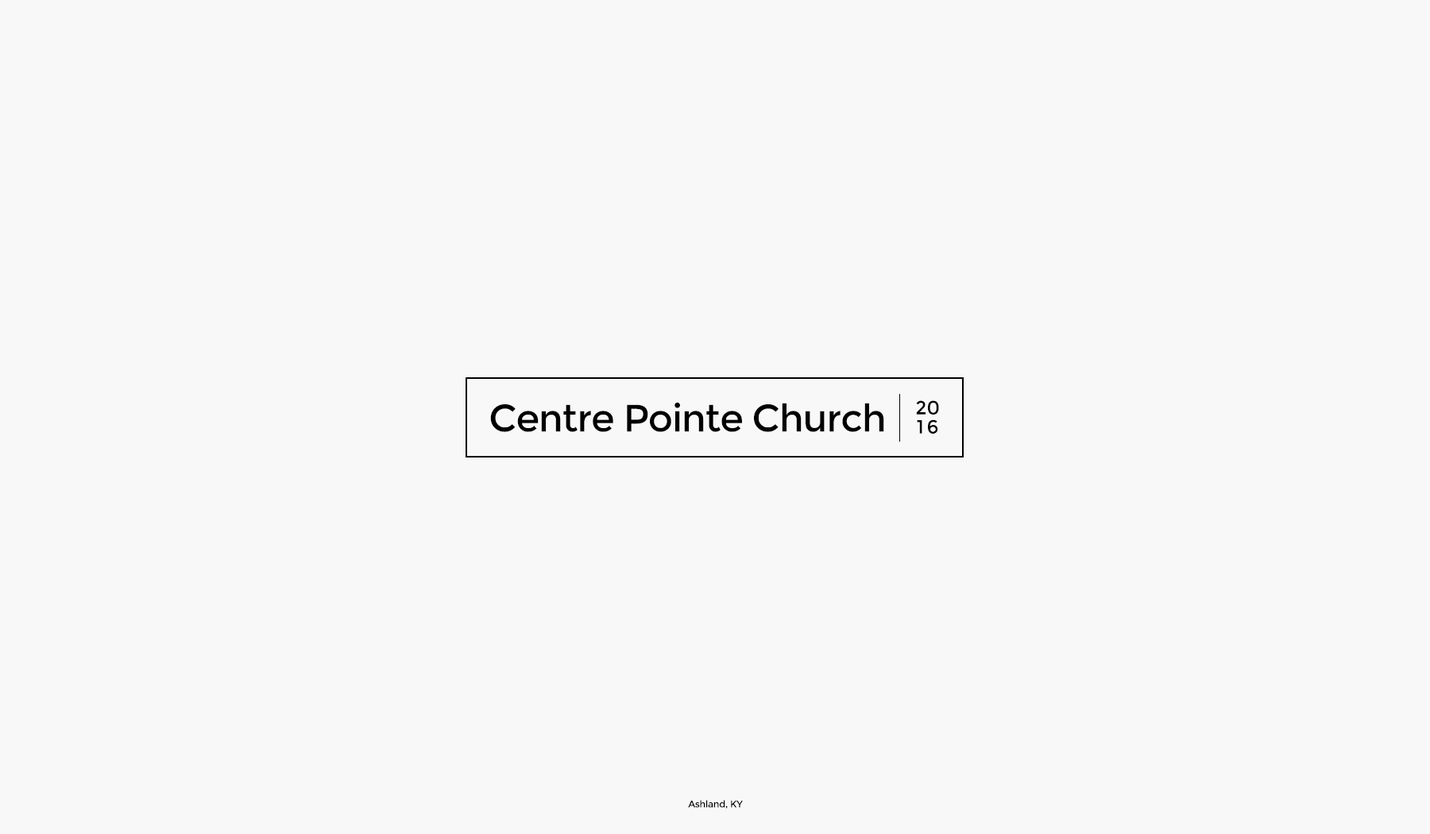
<style>
.page{position:relative;width:1430px;height:834px;background:#f8f8f8}
.page>*{position:absolute;margin:0}
.t1{font:38.1px "Montserrat-Regular";letter-spacing:-0.025em;color:#000000}
.t2{font:19.1px/19.1px "Montserrat-Regular";color:#000000}
.t3{font:19.1px/19.1px "Montserrat-Regular";letter-spacing:0.15em;color:#000000}
.t4{font:9.5px "Montserrat-Regular";letter-spacing:-0.025em;color:#000000}
</style>
<div class="page">
<p class="t1" style="left:490px;top:402px;width:394px;height:30px">Centre Pointe Church</p>
<p class="t2" style="left:916px;top:400px;width:23px;height:34px;text-align:center">20<br><span class="t3">16</span></p>
<p class="t4" style="left:688px;top:800px;width:55px;height:9px">Ashland, KY</p>
</div>
